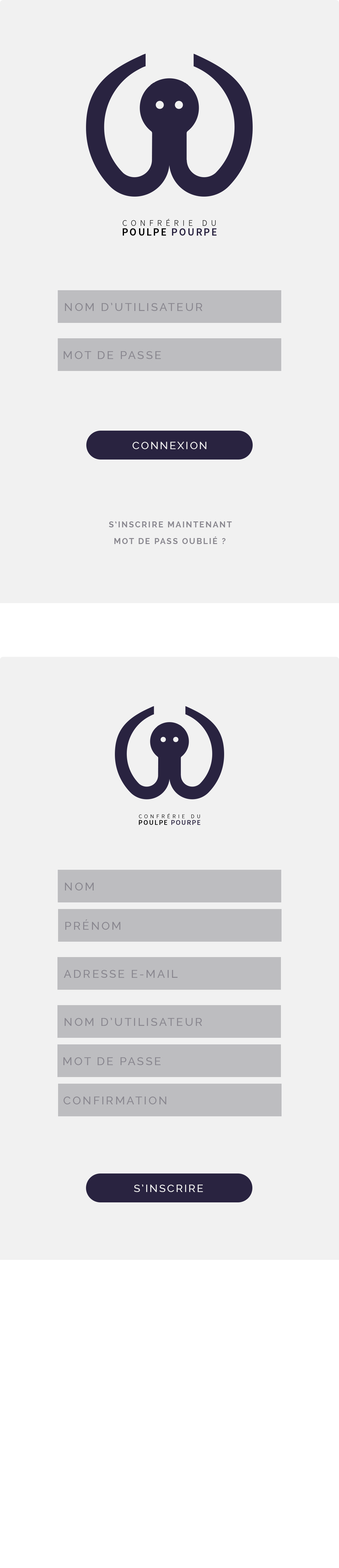
<style>
.page{position:relative;width:339px;height:1568px;background:#f1f1f1}
.page>*{position:absolute;margin:0}
.t1{font:11.4px "Raleway-Medium";letter-spacing:0.14em;color:#89878f;text-transform:uppercase}
.t2{font:10.5px "Raleway-Medium";letter-spacing:0.14em;color:#f1f1f1;text-transform:uppercase}
.t3{font:8.2px "Raleway-Bold";letter-spacing:0.14em;color:#89878f;text-transform:uppercase}
</style>
<div class="page">
<p class="t1" style="left:65px;top:303px;width:138px;height:8px">nom d’utilisateur</p>
<p class="t1" style="left:64px;top:351px;width:97px;height:8px">mot de passe</p>
<p class="t2" style="left:133px;top:442px;width:74px;height:7px">connexion</p>
<p class="t3" style="left:109px;top:521px;width:123px;height:6px">s’inscrire maintenant</p>
<p class="t3" style="left:114px;top:536px;width:112px;height:8px">mot de pass oublié ?</p>
<p class="t1" style="left:65px;top:883px;width:29px;height:7px">nom</p>
<p class="t1" style="left:65px;top:919px;width:56px;height:11px">prénom</p>
<p class="t1" style="left:64px;top:970px;width:114px;height:8px">adresse e-mail</p>
<p class="t1" style="left:65px;top:1018px;width:137px;height:8px">nom d’utilisateur</p>
<p class="t1" style="left:63px;top:1057px;width:98px;height:8px">mot de passe</p>
<p class="t1" style="left:63px;top:1097px;width:103px;height:7px">confirmation</p>
<p class="t2" style="left:134px;top:1184px;width:69px;height:8px">s’inscrire</p>
</div>
